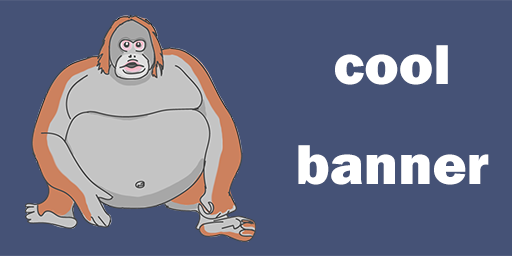
<style>
.page{position:relative;width:512px;height:256px;background:#455276}
.page>*{position:absolute;margin:0}
.t1{font:58.3px/100px "FranklinGothic-Heavy";color:#ffffff}
</style>
<div class="page">
<p class="t1" style="left:298px;top:45px;width:191px;height:140px;text-align:center">cool banner</p>
</div>
